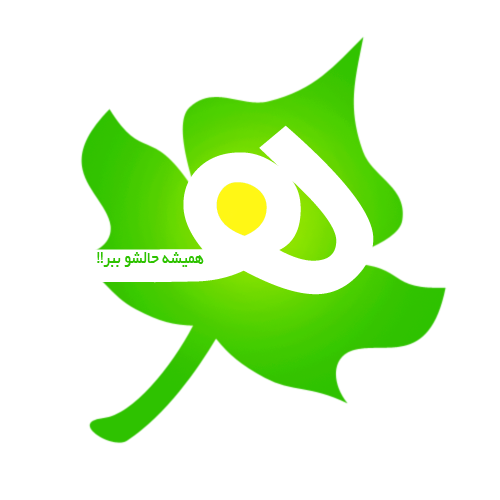
<style>
.page{position:relative;width:500px;height:500px;background:#ffffff}
.page>*{position:absolute;margin:0}
.t1{font:367.4px "BYekan";color:#ffffff;scale:1.09 1}
.t2{font:18.8px "BYekan";color:#2ec200;scale:0.84 1}
</style>
<div class="page">
<p class="t1" style="left:65px;top:125px;width:309px;height:170px">هـ</p>
<p class="t2" style="left:97px;top:252px;width:107px;height:15px">هميشه حالشو ببر!!</p>
</div>
